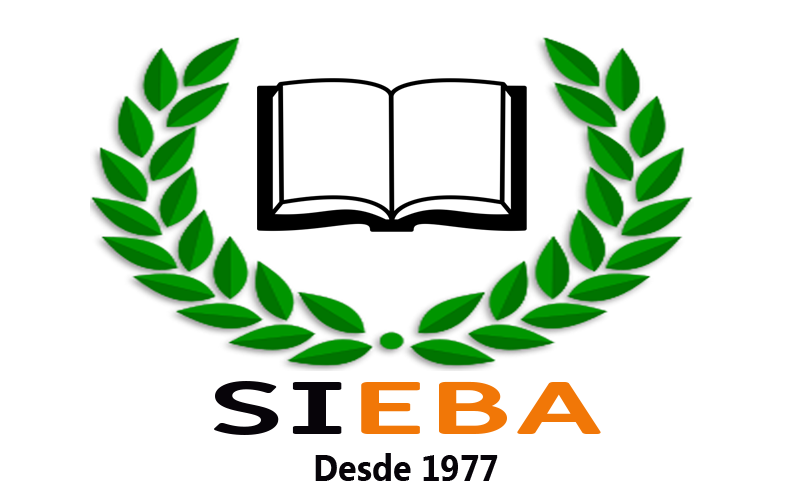
<style>
.page{position:relative;width:800px;height:500px;background:#ffffff}
.page>*{position:absolute;margin:0}
.t1{font:72.2px "MiriamLibre-Bold";color:#f17707;scale:2 1}
.t2{font:72.2px "MiriamLibre-Bold";color:#070409;scale:2 1}
.t3{font:36.6px "MyanmarText-Bold";color:#070409;scale:0.93 1}
</style>
<div class="page">
<p class="t1" style="left:214px;top:381px;width:387px;height:54px"><span class="t2">SI</span>EBA</p>
<p class="t3" style="left:315px;top:453px;width:183px;height:28px">Desde 1977</p>
</div>
